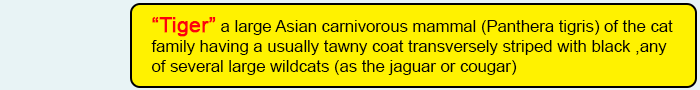
<style>
.page{position:relative;width:700px;height:90px;background:#fff200}
.page>*{position:absolute;margin:0}
.t1{font:16.7px "ArialMT";color:#020202}
.t2{font:20.8px "ArialMT";color:#fd010d;font-weight:bold}
</style>
<div class="page">
<p class="t1" style="left:151px;top:17px;width:522px;height:58px"><span class="t2">“Tiger”</span> a large Asian carnivorous mammal (Panthera tigris) of the cat <br>family having a usually tawny coat transversely striped with black ,any <br>of several large wildcats (as the jaguar or cougar)</p>
</div>
